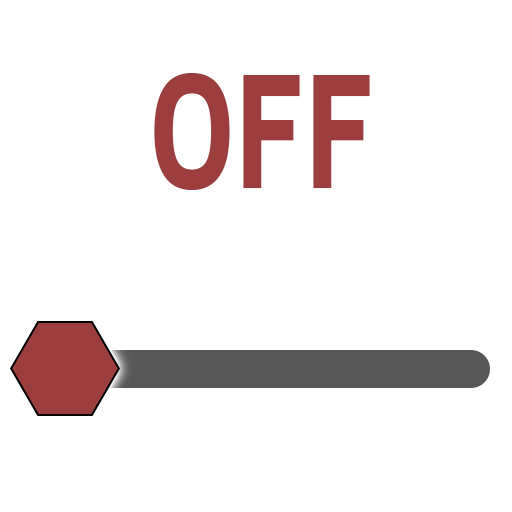
<style>
.page{position:relative;width:512px;height:512px;background:#ffffff}
.page>*{position:absolute;margin:0}
.t1{font:166.7px "ClearSans-Bold";color:#9c3e3e;scale:0.77 1}
</style>
<div class="page">
<p class="t1" style="left:154px;top:73px;width:216px;height:117px">OFF</p>
</div>
